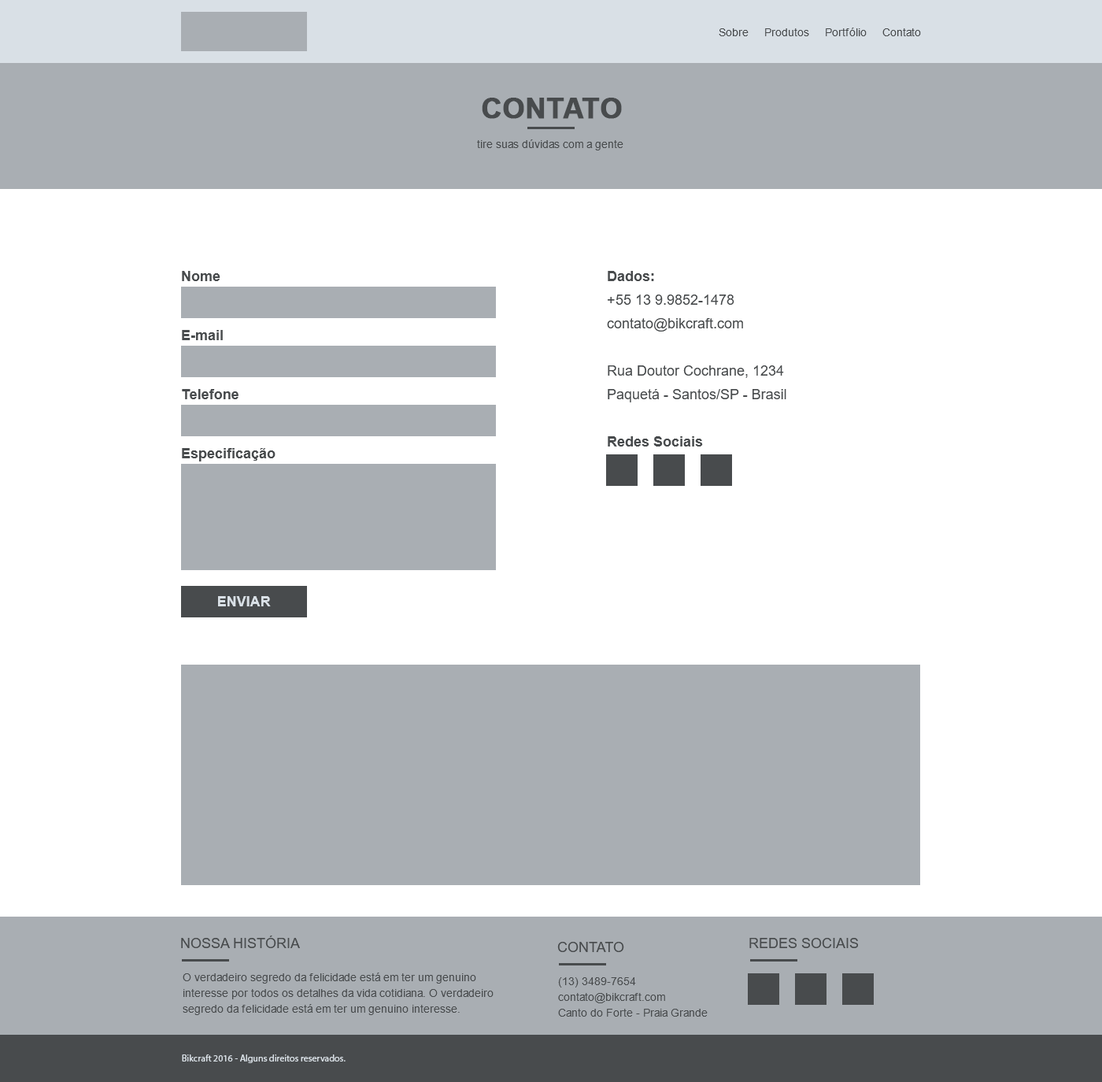
<style>
.page{position:relative;width:1102px;height:1082px;background:#ffffff}
.page>*{position:absolute;margin:0}
.t1{font:11px "ArialMT";color:#484b4d}
.t2{font:28.3px "Arial-BoldMT";color:#484b4d;text-transform:uppercase;font-weight:bold}
.t3{font:14.2px "Arial-BoldMT";color:#484b4d}
.t4{font:14.2px/23.6px "ArialMT";color:#484b4d}
.t5{font:14.2px/23.6px "Arial-BoldMT";color:#484b4d}
.t6{font:14.2px "Arial-BoldMT";color:#d9e0e6}
.t7{font:14.2px "ArialMT";color:#484b4d;text-transform:uppercase}
.t8{font:11px/15.7px "ArialMT";color:#484b4d}
.t9{font:9.4px "MyriadPro-Regular";color:#d9e0e6}
</style>
<div class="page">
<p class="t1" style="left:719px;top:28px;width:202px;height:8px">Sobre     Produtos     Portfólio     Contato</p>
<p class="t2" style="left:482px;top:98px;width:140px;height:21px">contato</p>
<p class="t1" style="left:477px;top:139px;width:147px;height:11px">tire suas dúvidas com a gente</p>
<p class="t3" style="left:182px;top:271px;width:38px;height:10px">Nome</p>
<p class="t4" style="left:607px;top:271px;width:180px;height:175px"><span class="t5">Dados:</span><br>+55 13 9.9852-1478<br>contato@bikcraft.com<br><br>Rua Doutor Cochrane, 1234<br>Paquetá - Santos/SP - Brasil<br><br><span class="t5">Redes Sociais</span></p>
<p class="t3" style="left:182px;top:330px;width:41px;height:10px">E-mail</p>
<p class="t3" style="left:182px;top:389px;width:57px;height:10px">Telefone</p>
<p class="t3" style="left:182px;top:448px;width:94px;height:13px">Especificação</p>
<p class="t6" style="left:218px;top:596px;width:53px;height:10px">ENVIAR</p>
<p class="t7" style="left:181px;top:935px;width:119px;height:13px">Nossa História</p>
<p class="t7" style="left:557px;top:942px;width:67px;height:10px">Contato</p>
<p class="t7" style="left:750px;top:938px;width:108px;height:10px">redes sociais</p>
<p class="t8" style="left:183px;top:972px;width:311px;height:43px">O verdadeiro segredo da felicidade está em ter um genuino<br>interesse por todos os detalhes da vida cotidiana. O verdadeiro segredo da felicidade está em ter um genuino interesse.</p>
<p class="t8" style="left:558px;top:977px;width:150px;height:39px">(13) 3489-7654<br>contato@bikcraft.com<br>Canto do Forte - Praia Grande</p>
<p class="t9" style="left:182px;top:1054px;width:164px;height:9px">Bikcraft 2016 - Alguns direitos reservados.</p>
</div>
